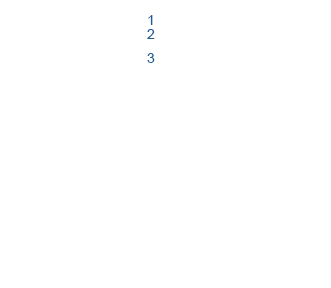
<style>
.page{position:relative;width:331px;height:288px;background:#ffffff}
.page>*{position:absolute;margin:0}
.t1{font:14px/14px "ArialMT";color:#1e5c96}
</style>
<div class="page">
<p class="t1" style="left:147px;top:15px;width:8px;height:48px">1<br>2<br>3</p>
</div>
